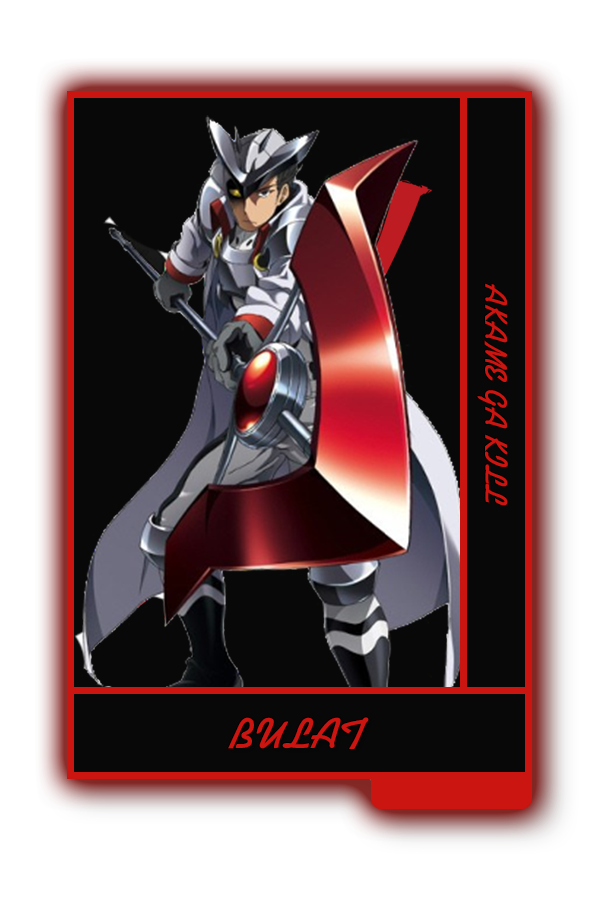
<style>
.page{position:relative;width:600px;height:900px;background:#080808}
.page>*{position:absolute;margin:0}
.t1{font:31.2px "Alako-Bold";color:#cb1511}
.t2{font:43.2px "Alako-Bold";color:#cb1511}
</style>
<div class="page">
<p class="t1" style="left:477px;top:283px;width:31px;height:223px;rotate:90deg">AKAME GA KILL</p>
<p class="t2" style="left:228px;top:717px;width:141px;height:32px">BULAT</p>
</div>
